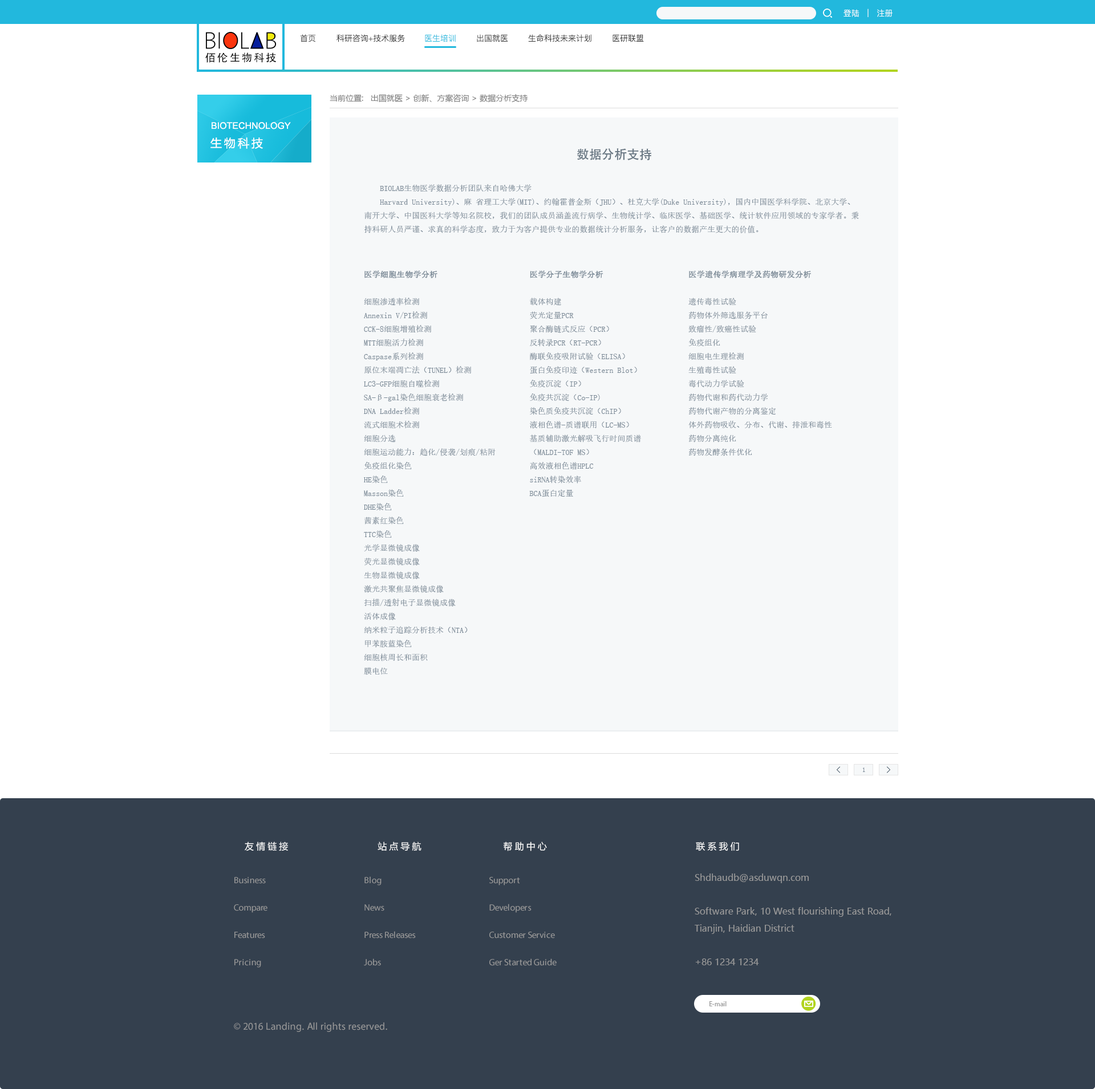
<style>
.page{position:relative;width:1095px;height:1089px;background:#ffffff}
.page>*{position:absolute;margin:0}
.t1{font:8px "PingFang-SC-Regular";color:#ffffff}
.t2{font:8px "PingFang-SC-Regular";color:#333333}
.t3{font:8px "PingFang-SC-Regular";color:#22b8dd}
.t4{font:10.6px "AdobeHeitiStd-Regular";letter-spacing:0.15em;color:#000000}
.t5{font:8px "MicrosoftYaHei";color:#808080}
.t6{font:9.1px "ArialMT";color:#ffffff;text-transform:uppercase}
.t7{font:11.4px "MicrosoftYaHei";letter-spacing:0.2em;color:#ffffff}
.t8{font:12.5px "AdobeHeitiStd-Regular";color:#6a7884}
.t9{font:8px/13.7px "SimSun";color:#7b8a97}
.t10{font:8px/13.7px "SimSun";color:#7b8a97;font-weight:bold}
.t11{font:6.8px "SimSun";color:#7b8a97}
.t12{font:9.1px "MicrosoftYaHei";letter-spacing:0.24em;color:#ffffff;text-transform:uppercase}
.t13{font:9.1px/27.4px "MyriadPro-Regular";color:#999999}
.t14{font:9.1px "MicrosoftYaHei";color:#999999}
.t15{font:9.1px/17.1px "MicrosoftYaHei";color:#999999}
.t16{font:6.8px "MyriadPro-Regular";color:#999999}
.t17{font:10.3px "MyriadPro-Regular";color:#999999}
</style>
<div class="page">
<p class="t1" style="left:843px;top:9px;width:49px;height:8px">登陆   |   注册</p>
<p class="t2" style="left:300px;top:34px;width:16px;height:8px">首页</p>
<p class="t2" style="left:336px;top:34px;width:69px;height:8px">科研咨询+技术服务</p>
<p class="t3" style="left:425px;top:34px;width:31px;height:8px">医生培训</p>
<p class="t2" style="left:477px;top:34px;width:31px;height:8px">出国就医</p>
<p class="t2" style="left:528px;top:34px;width:63px;height:8px">生命科技未来计划</p>
<p class="t2" style="left:612px;top:34px;width:32px;height:8px">医研联盟</p>
<p class="t4" style="left:205px;top:52px;width:71px;height:11px">佰伦生物科技</p>
<p class="t5" style="left:330px;top:94px;width:198px;height:9px">当前位置:   出国就医 &gt; 创新、方案咨询 &gt; 数据分析支持</p>
<p class="t6" style="left:212px;top:122px;width:79px;height:7px">Biotechnology</p>
<p class="t7" style="left:210px;top:137px;width:53px;height:12px">生物科技</p>
<p class="t8" style="left:577px;top:148px;width:74px;height:13px">数据分析支持</p>
<p class="t9" style="left:364px;top:184px;width:495px;height:49px">BIOLAB生物医学数据分析团队来自哈佛大学<br>    Harvard University)、麻 省理工大学(MIT)、约翰霍普金斯（JHU）、杜克大学(Duke University)，国内中国医学科学院、北京大学、南开大学、中国医科大学等知名院校，我们的团队成员涵盖流行病学、生物统计学、临床医学、基础医学、统计软件应用领域的专家学者。秉持科研人员严谨、求真的科学态度，致力于为客户提供专业的数据统计分析服务，让客户的数据产生更大的价值。</p>
<p class="t9" style="left:364px;top:270px;width:132px;height:405px"><span class="t10">医学细胞生物学分析<br></span><br>细胞渗透率检测<br>Annexin V/PI检测<br>CCK-8细胞增殖检测<br>MTT细胞活力检测<br>Caspase系列检测<br>原位末端凋亡法（TUNEL）检测<br>LC3-GFP细胞自噬检测<br>SA-β-gal染色细胞衰老检测<br>DNA Ladder检测<br>流式细胞术检测<br>细胞分选<br>细胞运动能力：趋化/侵袭/划痕/粘附<br>免疫组化染色<br>HE染色<br>Masson染色<br>DHE染色<br>茜素红染色<br>TTC染色<br>光学显微镜成像<br>荧光显微镜成像<br>生物显微镜成像<br>激光共聚焦显微镜成像<br>扫描/透射电子显微镜成像<br>活体成像<br>纳米粒子追踪分析技术（NTA）<br>甲苯胺蓝染色<br>细胞核周长和面积<br>膜电位</p>
<p class="t9" style="left:529px;top:270px;width:112px;height:227px"><span class="t10">医学分子生物学分析</span> <br><br>载体构建<br>荧光定量PCR<br>聚合酶链式反应（PCR）<br>反转录PCR（RT-PCR）<br>酶联免疫吸附试验（ELISA）<br>蛋白免疫印迹（Western Blot）<br>免疫沉淀（IP）<br>免疫共沉淀（Co-IP)<br>染色质免疫共沉淀（ChIP）<br>液相色谱-质谱联用（LC-MS）<br>基质辅助激光解吸飞行时间质谱<br>（MALDI-TOF MS）<br>高效液相色谱HPLC<br>siRNA转染效率<br>BCA蛋白定量</p>
<p class="t9" style="left:688px;top:270px;width:144px;height:186px"><span class="t10">医学遗传学病理学及药物研发分析</span> <br><br>遗传毒性试验<br>药物体外筛选服务平台<br>致瘤性/致癌性试验<br>免疫组化<br>细胞电生理检测<br>生殖毒性试验<br>毒代动力学试验<br>药物代谢和药代动力学<br>药物代谢产物的分离鉴定<br>体外药物吸收、分布、代谢、排泄和毒性<br>药物分离纯化<br>药物发酵条件优化</p>
<p class="t11" style="left:863px;top:768px;width:2px;height:4px">1</p>
<p class="t12" style="left:245px;top:842px;width:43px;height:9px">友情链接</p>
<p class="t12" style="left:377px;top:842px;width:44px;height:9px">站点导航</p>
<p class="t12" style="left:504px;top:842px;width:43px;height:9px">帮助中心</p>
<p class="t12" style="left:696px;top:842px;width:43px;height:9px">联系我们</p>
<p class="t13" style="left:234px;top:877px;width:33px;height:91px">Business<br>Compare<br>Features<br>Pricing</p>
<p class="t13" style="left:364px;top:876px;width:52px;height:90px">Blog<br>News<br>Press Releases<br>Jobs</p>
<p class="t13" style="left:489px;top:877px;width:68px;height:89px">Support<br>Developers<br>Customer Service<br>Ger Started Guide</p>
<p class="t14" style="left:695px;top:874px;width:114px;height:9px">Shdhaudb@asduwqn.com</p>
<p class="t15" style="left:695px;top:907px;width:196px;height:27px">Software Park, 10 West flourishing East Road, Tianjin, Haidian District</p>
<p class="t14" style="left:695px;top:959px;width:64px;height:6px">+86 1234 1234</p>
<p class="t16" style="left:709px;top:1001px;width:17px;height:5px">E-mail</p>
<p class="t17" style="left:234px;top:1022px;width:153px;height:10px">© 2016 Landing. All rights reserved.</p>
</div>
